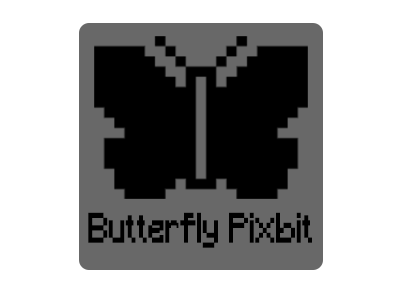
<style>
.page{position:relative;width:400px;height:304px;background:#ffffff}
.page>*{position:absolute;margin:0}
.t1{font:39.6px "Minecraft";color:#000000;scale:0.76 1}
</style>
<div class="page">
<p class="t1" style="left:88px;top:212px;width:224px;height:36px">Butterfly Pixbit</p>
</div>
